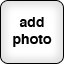
<style>
.page{position:relative;width:64px;height:64px;background:#ffffff}
.page>*{position:absolute;margin:0}
.t1{font:14px "Helvetica-Bold";color:#000000}
</style>
<div class="page">
<p class="t1" style="left:13px;top:17px;width:39px;height:30px;text-align:center">add<br>photo</p>
</div>
